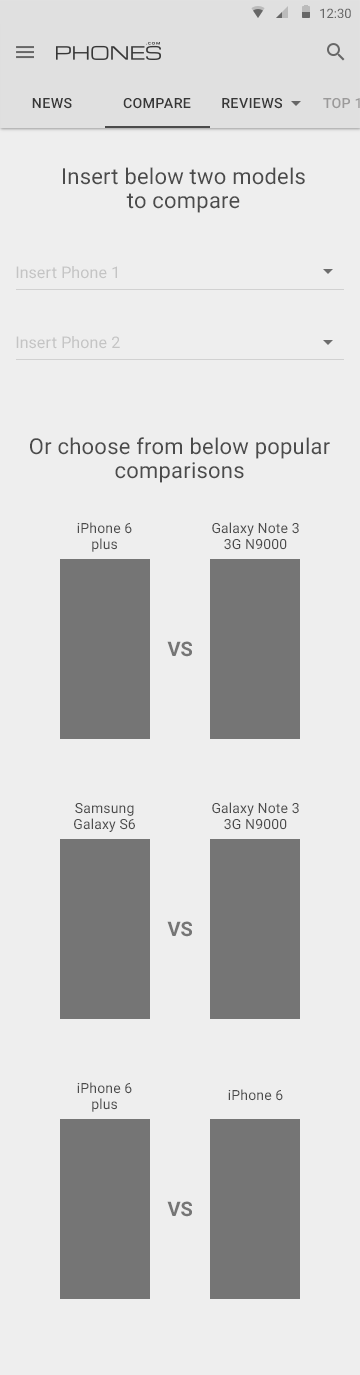
<style>
.page{position:relative;width:360px;height:1375px;background:#eeeeee}
.page>*{position:absolute;margin:0}
.t1{font:14px "Roboto-Medium";letter-spacing:0.01em;color:#373737}
.t2{font:22px/24px "Roboto-Regular";letter-spacing:0.01em;color:#4b4b4b}
.t3{font:16px "Roboto-Regular";letter-spacing:0.01em;color:#c4c4c4}
.t4{font:14px/16px "Roboto-Regular";letter-spacing:0.01em;color:#4b4b4b}
.t5{font:20px "Roboto-Bold";letter-spacing:0.005em;color:#757575}
.t6{font:14px "Roboto-Regular";letter-spacing:0.01em;color:#4b4b4b}
</style>
<div class="page">
<p class="t1" style="left:32px;top:98px;width:40px;height:11px">NEWS</p>
<p class="t1" style="left:123px;top:98px;width:68px;height:11px">COMPARE</p>
<p class="t1" style="left:222px;top:98px;width:60px;height:11px">REVIEWS</p>
<p class="t2" style="left:63px;top:167px;width:242px;height:46px;text-align:center">Insert below two models<br>to compare</p>
<p class="t3" style="left:16px;top:266px;width:101px;height:13px">Insert Phone 1</p>
<p class="t3" style="left:16px;top:336px;width:104px;height:13px">Insert Phone 2</p>
<p class="t2" style="left:30px;top:437px;width:300px;height:46px;text-align:center">Or choose from below popular<br>comparisons</p>
<p class="t4" style="left:77px;top:522px;width:55px;height:30px;text-align:center">iPhone 6<br>plus</p>
<p class="t4" style="left:212px;top:522px;width:87px;height:28px;text-align:center">Galaxy Note 3<br>3G N9000</p>
<p class="t5" style="left:167px;top:641px;width:25px;height:16px">VS</p>
<p class="t4" style="left:74px;top:803px;width:61px;height:29px;text-align:center">Samsung<br>Galaxy S6</p>
<p class="t4" style="left:212px;top:802px;width:87px;height:28px;text-align:center">Galaxy Note 3<br>3G N9000</p>
<p class="t5" style="left:167px;top:921px;width:25px;height:16px">VS</p>
<p class="t4" style="left:77px;top:1082px;width:55px;height:30px;text-align:center">iPhone 6<br>plus</p>
<p class="t6" style="left:228px;top:1089px;width:55px;height:12px">iPhone 6</p>
<p class="t5" style="left:167px;top:1201px;width:25px;height:16px">VS</p>
</div>
